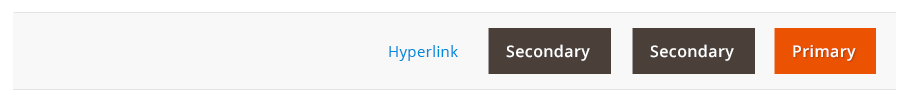
<style>
.page{position:relative;width:906px;height:104px;background:#f8f8f8}
.page>*{position:absolute;margin:0}
.t1{font:15px "OpenSans";letter-spacing:0.025em;color:#008bdb}
.t2{font:16px "OpenSans-Semibold";letter-spacing:0.025em;color:#ffffff}
.t3{font:16px "OpenSans-Semibold";letter-spacing:0.025em;color:#fefefe}
</style>
<div class="page">
<p class="t1" style="left:389px;top:45px;width:69px;height:16px">Hyperlink</p>
<p class="t2" style="left:506px;top:44px;width:84px;height:17px">Secondary</p>
<p class="t2" style="left:650px;top:44px;width:84px;height:17px">Secondary</p>
<p class="t3" style="left:793px;top:45px;width:63px;height:16px">Primary</p>
</div>
